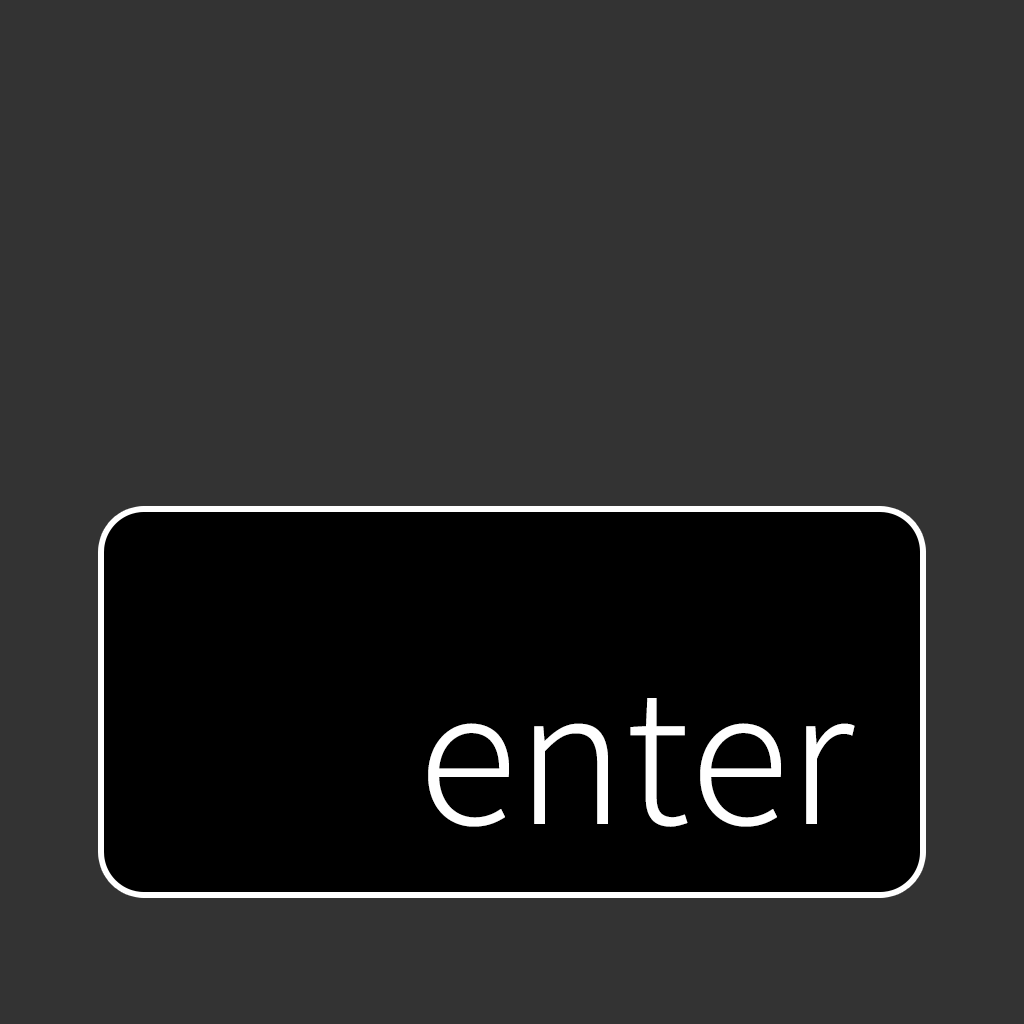
<style>
.page{position:relative;width:1024px;height:1024px;background:#333333}
.page>*{position:absolute;margin:0}
.t1{font:183.3px "SourceHanSansJP-Light";color:#ffffff}
</style>
<div class="page">
<p class="t1" style="left:428px;top:698px;width:427px;height:129px">enter</p>
</div>
